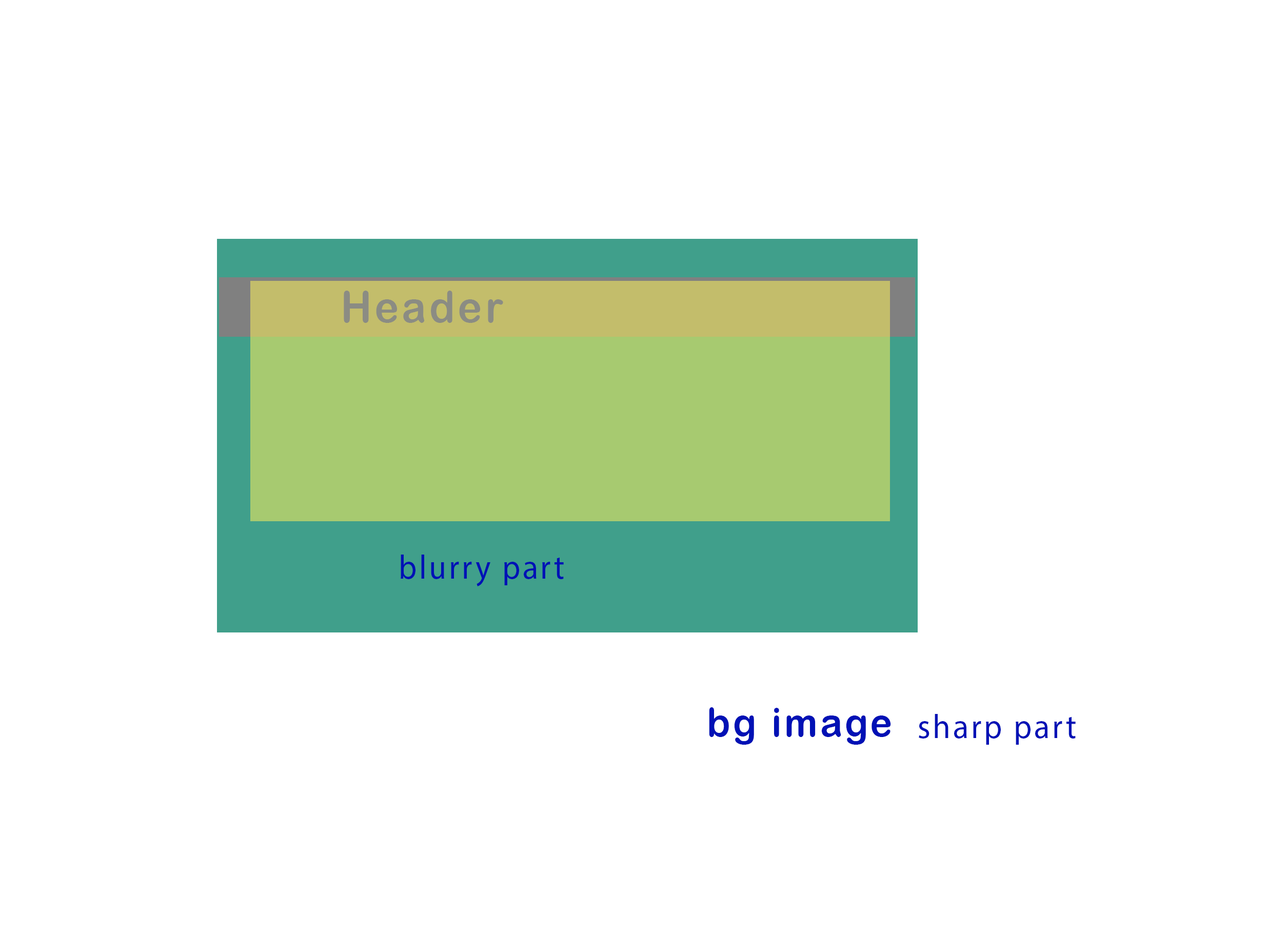
<style>
.page{position:relative;width:1267px;height:941px;background:#ffffff}
.page>*{position:absolute;margin:0}
.t1{font:43.6px "ArialRoundedMTBold";letter-spacing:0.075em;color:#8b8c83;scale:0.93 1}
.t2{font:34.1px "MyriadPro-Regular";letter-spacing:0.075em;color:#0011b5;scale:0.93 1}
.t3{font:40px "ArialRoundedMTBold";letter-spacing:0.075em;color:#0011b5;scale:0.93 1}
.t4{font:34.3px "MyriadPro-Regular";letter-spacing:0.075em;color:#0011b5;scale:0.93 1}
</style>
<div class="page">
<p class="t1" style="left:344px;top:291px;width:159px;height:32px">Header</p>
<p class="t2" style="left:400px;top:555px;width:164px;height:32px">blurry part</p>
<p class="t3" style="left:709px;top:708px;width:182px;height:37px">bg image</p>
<p class="t4" style="left:918px;top:714px;width:157px;height:31px">sharp part</p>
</div>
